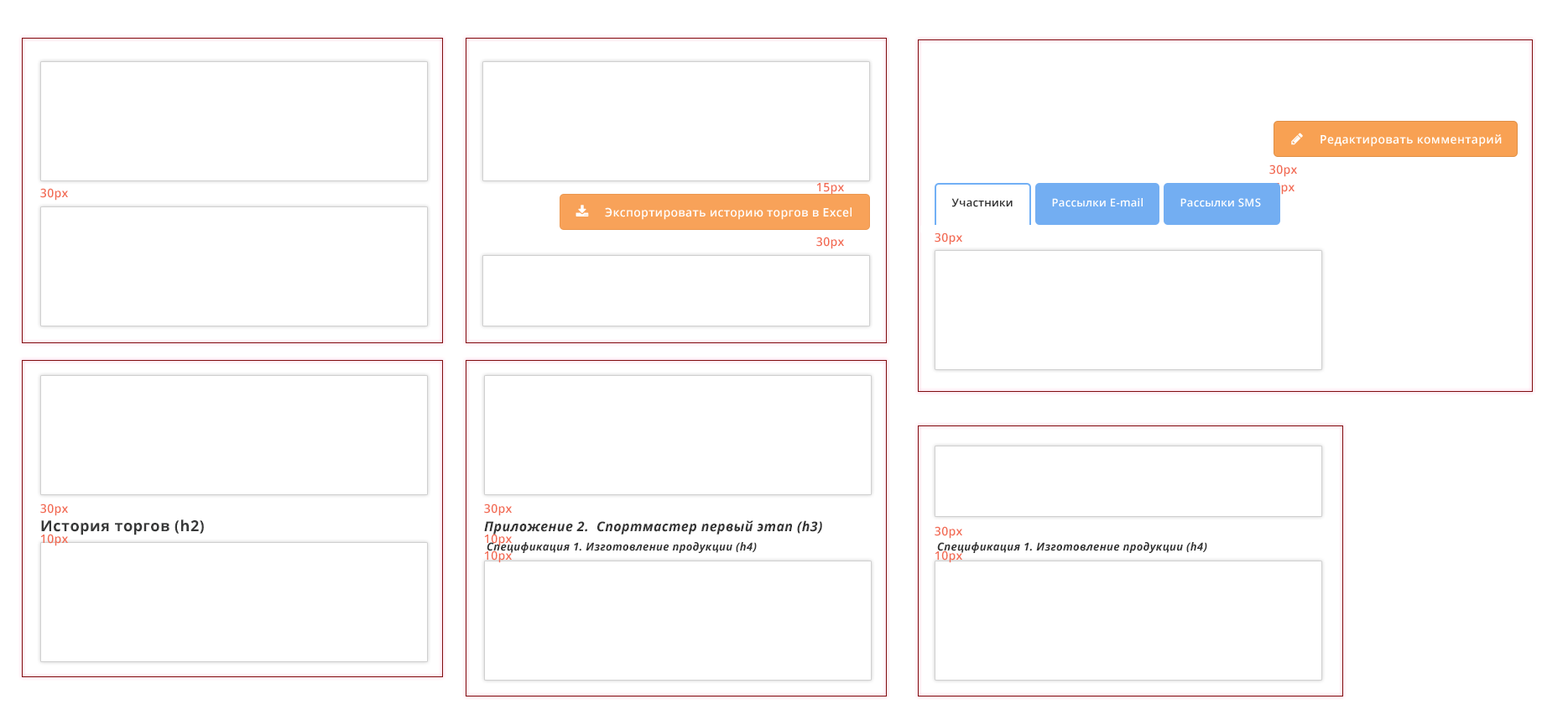
<style>
.page{position:relative;width:1568px;height:720px;background:#ffffff}
.page>*{position:absolute;margin:0}
.t1{font:11.7px "OpenSans-Semibold";letter-spacing:0.025em;color:#ffffff}
.t2{font:11.7px "OpenSans-SemiBold";letter-spacing:0.025em;color:#f26a52}
.t3{font:11.7px "OpenSans-SemiBold";letter-spacing:0.025em}
.t4{font:10.9px "OpenSans-Semibold";letter-spacing:0.025em;color:#333333}
.t5{font:10.9px "OpenSans-Semibold";letter-spacing:0.025em;color:#ffffff}
.t6{font:15.1px "OpenSans-Bold";letter-spacing:0.025em;color:#373838}
.t7{font:13.4px "OpenSans-BoldItalic";letter-spacing:0.025em;color:#333333}
.t8{font:10.9px "OpenSans-BoldItalic";letter-spacing:0.025em;color:#333333}
</style>
<div class="page">
<p class="t1" style="left:1321px;top:134px;width:181px;height:13px">Редактировать комментарий</p>
<p class="t2" style="left:1269px;top:164px;width:28px;height:13px">30px</p>
<p class="t2" style="left:816px;top:183px;width:28px;height:12px">15px</p>
<p class="t3" style="left:1267px;top:183px;width:28px;height:12px">15px</p>
<p class="t2" style="left:40px;top:188px;width:28px;height:13px">30px</p>
<p class="t4" style="left:951px;top:198px;width:62px;height:9px">Участники</p>
<p class="t5" style="left:1052px;top:198px;width:91px;height:9px">Рассылки E-mail</p>
<p class="t5" style="left:1180px;top:198px;width:81px;height:9px">Рассылки SMS</p>
<p class="t1" style="left:605px;top:207px;width:247px;height:13px">Экспортировать историю торгов в Excel</p>
<p class="t2" style="left:935px;top:232px;width:27px;height:13px">30px</p>
<p class="t2" style="left:816px;top:237px;width:28px;height:12px">30px</p>
<p class="t2" style="left:40px;top:503px;width:28px;height:13px">30px</p>
<p class="t2" style="left:484px;top:503px;width:28px;height:13px">30px</p>
<p class="t6" style="left:41px;top:519px;width:163px;height:16px">История торгов (h2)</p>
<p class="t7" style="left:484px;top:520px;width:338px;height:14px">Приложение 2.  Спортмастер первый этап (h3)</p>
<p class="t2" style="left:40px;top:534px;width:28px;height:12px">10px</p>
<p class="t2" style="left:484px;top:534px;width:28px;height:12px">10px</p>
<p class="t2" style="left:935px;top:526px;width:27px;height:13px">30px</p>
<p class="t8" style="left:487px;top:542px;width:270px;height:11px">Спецификация 1. Изготовление продукции (h4)</p>
<p class="t8" style="left:937px;top:542px;width:270px;height:11px">Спецификация 1. Изготовление продукции (h4)</p>
<p class="t2" style="left:484px;top:550px;width:28px;height:13px">10px</p>
<p class="t2" style="left:935px;top:550px;width:27px;height:13px">10px</p>
</div>
